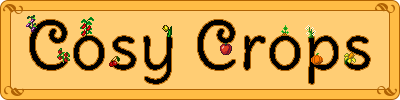
<style>
.page{position:relative;width:400px;height:100px;background:#ffcd74}
.page>*{position:absolute;margin:0}
.t1{font:64px "DeliusSwashCaps-Regular";letter-spacing:0.025em;color:#000000}
</style>
<div class="page">
<p class="t1" style="left:30px;top:20px;width:340px;height:64px">Cosy Crops</p>
</div>
